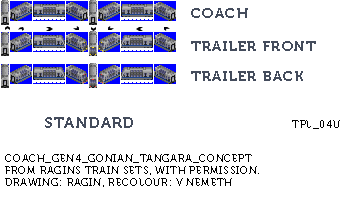
<style>
.page{position:relative;width:353px;height:215px;background:#ffffff}
.page>*{position:absolute;margin:0}
.t1{font:14px "Museo700-Regular";letter-spacing:0.1em;color:#444c5c;text-transform:uppercase}
.t2{font:15px "Museo700-Regular";letter-spacing:0.1em;color:#444c5c;text-transform:uppercase}
.t3{font:10px "Museo700-Regular";letter-spacing:0.075em;color:#000000;text-transform:uppercase}
</style>
<div class="page">
<p class="t1" style="left:191px;top:8px;width:57px;height:10px">coach</p>
<p class="t1" style="left:191px;top:41px;width:125px;height:10px">trailer front</p>
<p class="t1" style="left:191px;top:71px;width:112px;height:10px">trailer back</p>
<p class="t2" style="left:45px;top:117px;width:88px;height:11px">STANDARD</p>
<p class="t3" style="left:292px;top:120px;width:48px;height:9px">tpl_04u</p>
<p class="t3" style="left:5px;top:154px;width:254px;height:33px">Coach_Gen4_Gonian_Tangara_Concept<br>From Ragins Train Sets, with permission.<br>Drawing: Ragin, recolour: V Nemeth</p>
</div>
